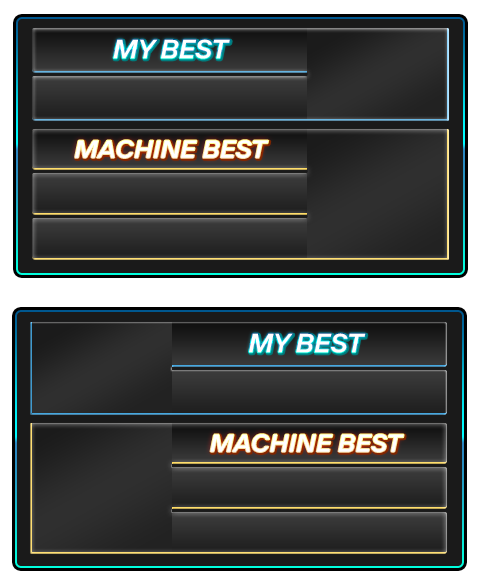
<style>
.page{position:relative;width:480px;height:584px}
.page>*{position:absolute;margin:0}
.t1{font:26.2px "TTInterphasesProTrl-DmBdIt";color:#ffffff;scale:1.07 1}
.t2{font:24.9px "TTInterphasesProTrl-DmBdIt";color:#ffffff;scale:1.07 1}
</style>
<div class="page">
<p class="t1" style="left:113px;top:39px;width:117px;height:20px">MY BEST</p>
<p class="t2" style="left:75px;top:140px;width:194px;height:18px">MACHINE BEST</p>
<p class="t1" style="left:249px;top:333px;width:117px;height:20px">MY BEST</p>
<p class="t2" style="left:210px;top:434px;width:194px;height:18px">MACHINE BEST</p>
</div>
